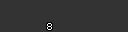
<style>
.page{position:relative;width:128px;height:32px;background:#333333}
.page>*{position:absolute;margin:0}
.t1{font:10px "Terminal";color:#ffffff}
</style>
<div class="page">
<p class="t1" style="left:47px;top:23px;width:5px;height:7px">8</p>
</div>
